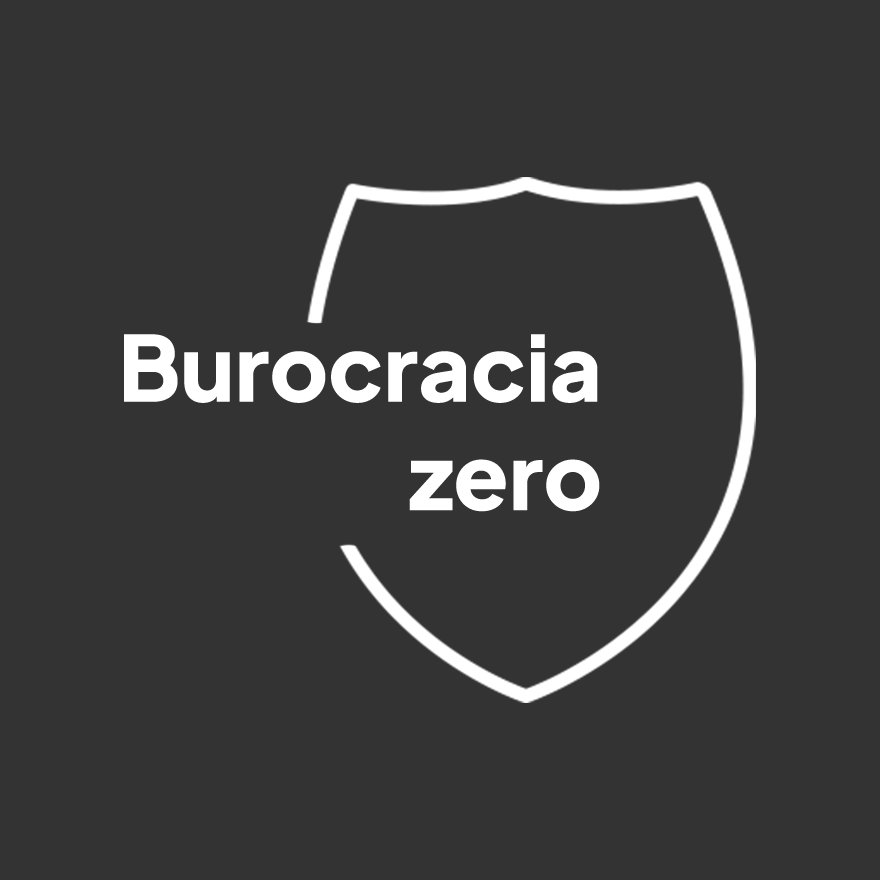
<style>
.page{position:relative;width:880px;height:880px;background:#333333}
.page>*{position:absolute;margin:0}
.t1{font:90.3px "PlusJakartaSans-ExtraBold";color:#ffffff}
</style>
<div class="page">
<p class="t1" style="left:124px;top:334px;width:476px;height:178px;text-align:right">Burocracia<br>zero</p>
</div>
